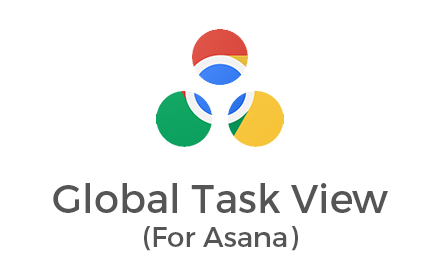
<style>
.page{position:relative;width:440px;height:280px;background:#ffffff}
.page>*{position:absolute;margin:0}
.t1{font:40px "Montserrat-Regular";color:#555555}
.t2{font:28px "Montserrat-Regular";color:#555555}
</style>
<div class="page">
<p class="t1" style="left:53px;top:183px;width:335px;height:68px;text-align:center">Global Task View<br><span class="t2">(For Asana)</span></p>
</div>
